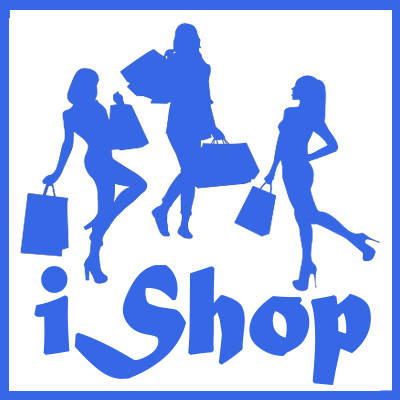
<style>
.page{position:relative;width:400px;height:400px;background:#ffffff}
.page>*{position:absolute;margin:0}
.t1{font:129px "MaturaMTScriptCapitals";letter-spacing:-0.02em;color:#3668e6;font-weight:bold}
</style>
<div class="page">
<p class="t1" style="left:34px;top:265px;width:337px;height:121px">iShop</p>
</div>
